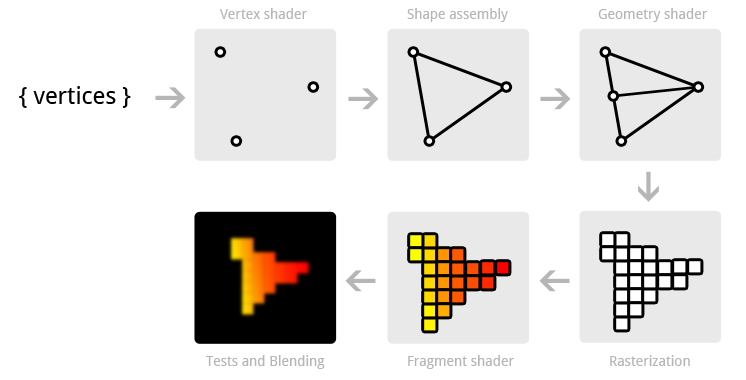
<style>
.page{position:relative;width:746px;height:380px;background:#ffffff}
.page>*{position:absolute;margin:0}
.t1{font:14px "DroidSans";color:#b6b6b6}
.t2{font:24px "DroidSans";color:#000000}
</style>
<div class="page">
<p class="t1" style="left:220px;top:8px;width:87px;height:11px">Vertex shader</p>
<p class="t1" style="left:407px;top:8px;width:101px;height:14px">Shape assembly</p>
<p class="t1" style="left:598px;top:8px;width:110px;height:14px">Geometry shader</p>
<p class="t2" style="left:19px;top:86px;width:112px;height:22px">{ vertices }</p>
<p class="t1" style="left:206px;top:355px;width:119px;height:14px">Tests and Blending</p>
<p class="t1" style="left:408px;top:355px;width:106px;height:14px">Fragment shader</p>
<p class="t1" style="left:610px;top:355px;width:80px;height:11px">Rasterization</p>
</div>
